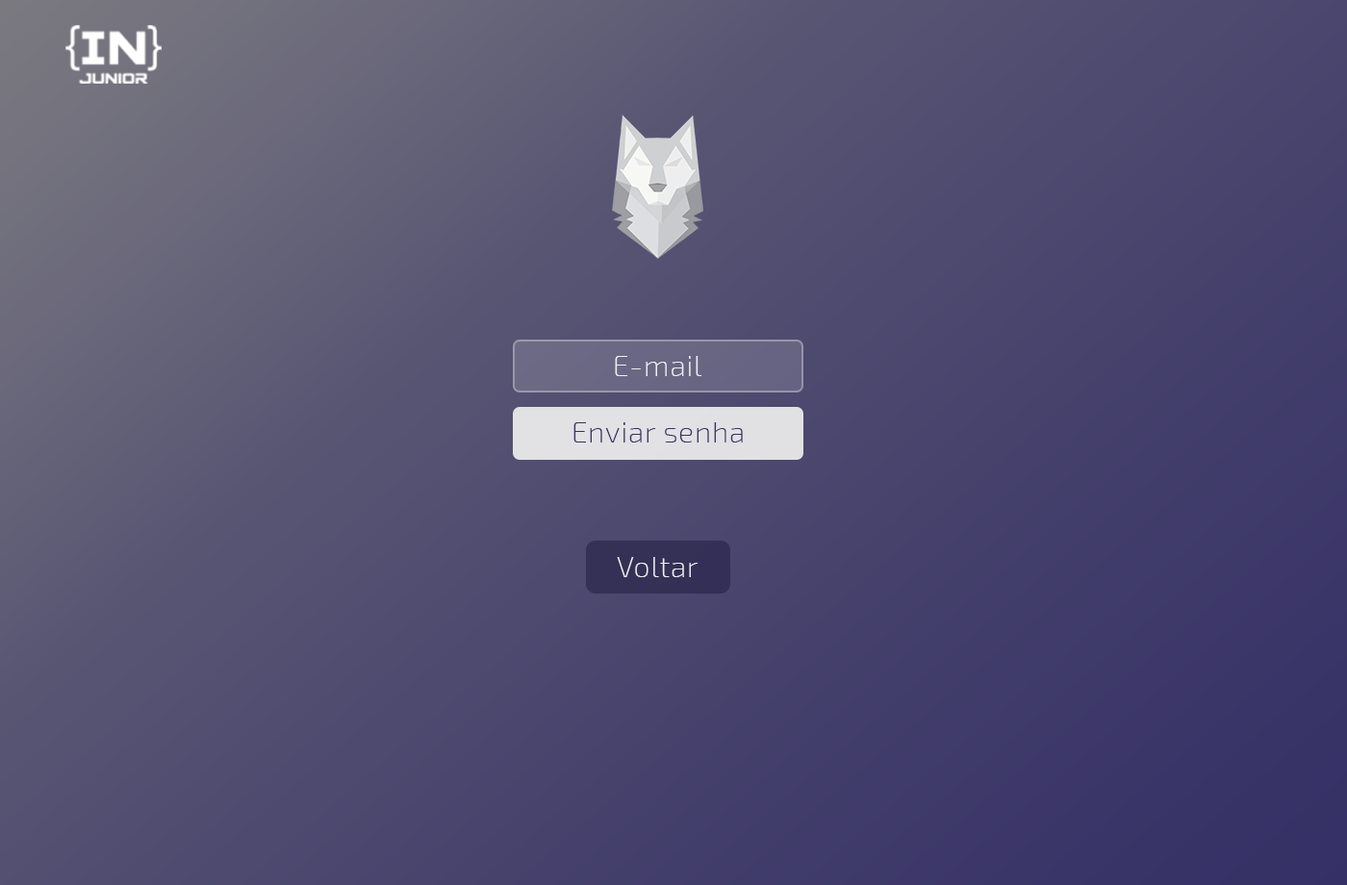
<style>
.page{position:relative;width:1347px;height:885px}
.page>*{position:absolute;margin:0}
.t1{font:29px "Exo2-ExtraLight";letter-spacing:0.025em;color:#eeeeee}
.t2{font:29px "Exo2-ExtraLight";letter-spacing:0.025em;color:#363166}
</style>
<div class="page">
<p class="t1" style="left:615px;top:356px;width:87px;height:20px">E-mail</p>
<p class="t2" style="left:573px;top:422px;width:170px;height:21px">Enviar senha</p>
<p class="t1" style="left:617px;top:557px;width:82px;height:20px">Voltar</p>
</div>
